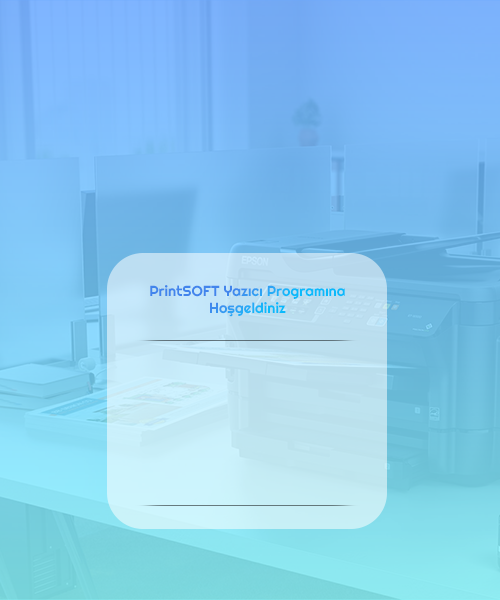
<style>
.page{position:relative;width:500px;height:600px}
.page>*{position:absolute;margin:0}
.t1{font:14.6px "Righteous-Regular"}
</style>
<div class="page">
<p class="t1" style="left:150px;top:285px;width:195px;height:32px;text-align:center">PrintSOFT Yazıcı Programına<br>Hoşgeldiniz</p>
</div>
